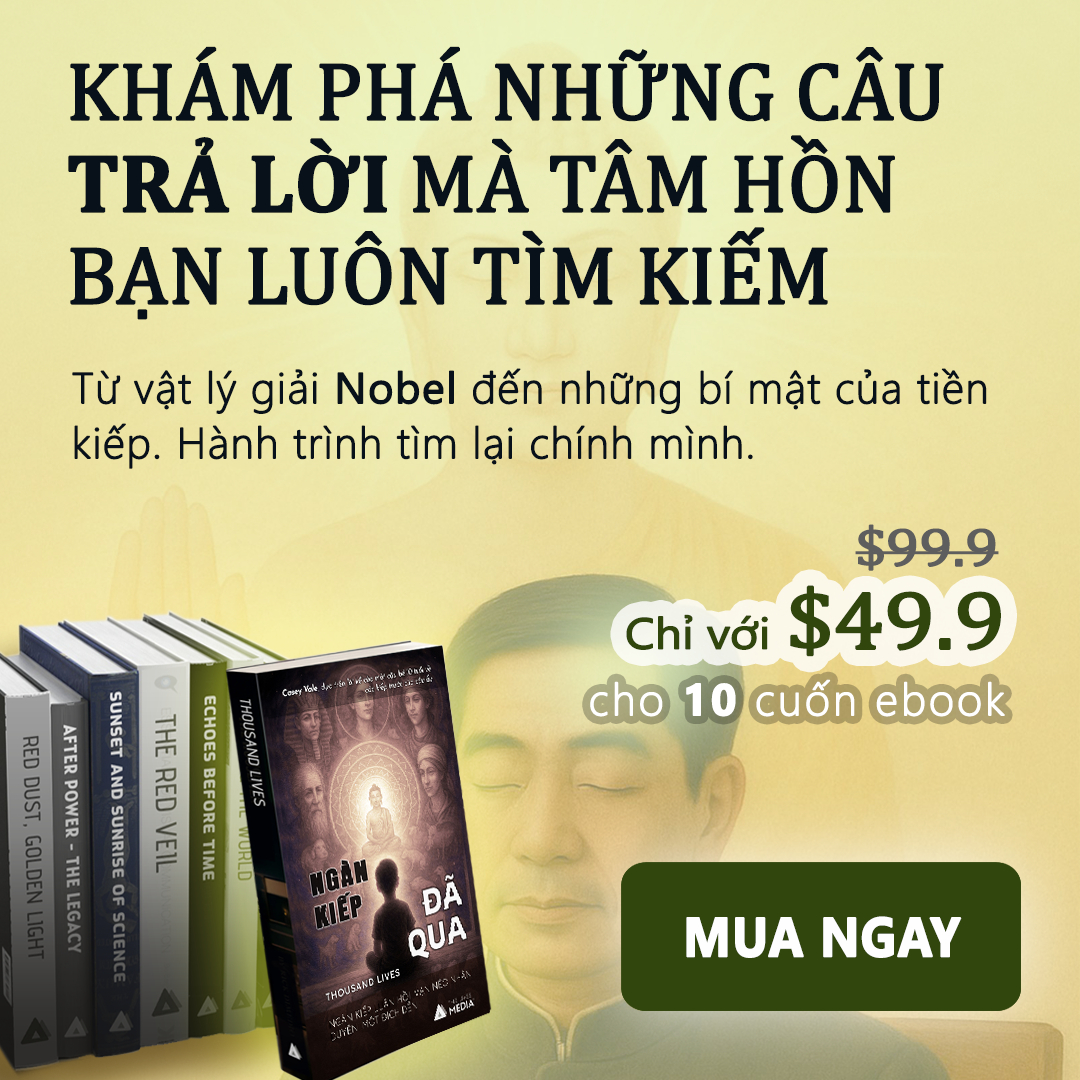
<style>
.page{position:relative;width:1080px;height:1080px}
.page>*{position:absolute;margin:0}
.t1{font:82px/92px "Cambria";letter-spacing:-0.015em;color:#08101a;font-weight:bold}
.t2{font:82px/92px "Cambria-Bold";letter-spacing:-0.015em;color:#08101a;font-weight:bold}
.t3{font:43.2px/55px "SegoeUI-Light";letter-spacing:0.01em;color:#08101a;font-weight:bold}
.t4{font:43.2px/55px "SegoeUI";letter-spacing:0.01em;color:#08101a;font-weight:bold}
.t5{font:54px "Cambria";letter-spacing:-0.025em;color:#5f5e5e;font-weight:bold;scale:1.11 1}
.t6{font:43.2px "SegoeUI";letter-spacing:-0.025em;color:#31460c;font-weight:bold;scale:1.11 1}
.t7{font:54px "Cambria";letter-spacing:-0.025em;color:#31460c;font-weight:bold;scale:1.11 1}
.t8{font:82.8px "Cambria";letter-spacing:-0.025em;color:#31460c;font-weight:bold;scale:1.11 1}
.t9{font:44px "SegoeUI-Light";letter-spacing:0.05em;color:#ffffff;font-weight:bold}
.t10{font:44px "SegoeUI-Bold";letter-spacing:0.05em;color:#ffffff;font-weight:bold}
.t11{font:55px "SegoeUI-Bold";letter-spacing:0.005em;color:#fefefe;font-weight:bold;scale:0.9 1}
</style>
<div class="page">
<p class="t1" style="left:68px;top:46px;width:876px;height:274px">KHÁM PHÁ NHỮNG CÂU <span class="t2">TRẢ LỜI </span>MÀ TÂM HỒN BẠN LUÔN TÌM KIẾM</p>
<p class="t3" style="left:72px;top:368px;width:915px;height:101px">Từ vật lý giải <span class="t4">Nobel </span>đến những bí mật của tiền kiếp. Hành trình tìm lại chính mình.</p>
<p class="t5" style="left:855px;top:524px;width:144px;height:47px">$99.9</p>
<p class="t6" style="left:626px;top:585px;width:375px;height:72px"><span class="t7"><br></span>Chỉ với <span class="t8">$49.9</span></p>
<p class="t9" style="left:590px;top:679px;width:415px;height:38px">cho <span class="t10">10</span> cuốn ebook</p>
<p class="t11" style="left:686px;top:916px;width:276px;height:42px">MUA NGAY</p>
</div>
